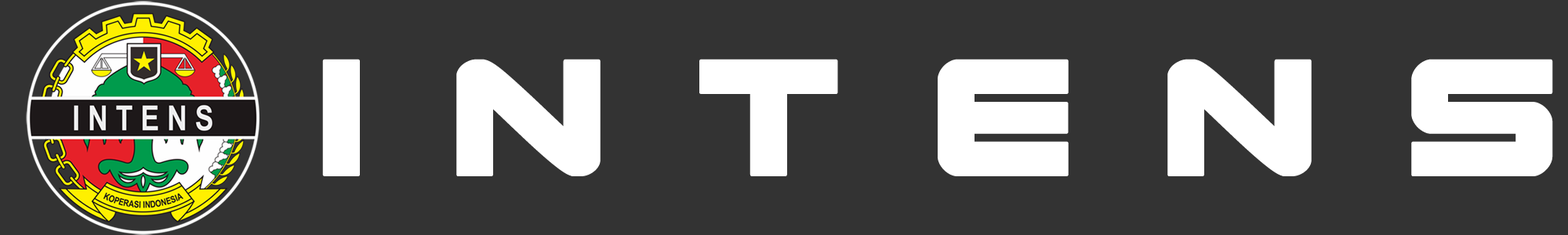
<style>
.page{position:relative;width:1568px;height:235px;background:#333333}
.page>*{position:absolute;margin:0}
.t1{font:232.5px "SpaceRangerBold";color:#ffffff}
</style>
<div class="page">
<p class="t1" style="left:322px;top:59px;width:1231px;height:117px">i n t e n s</p>
</div>
